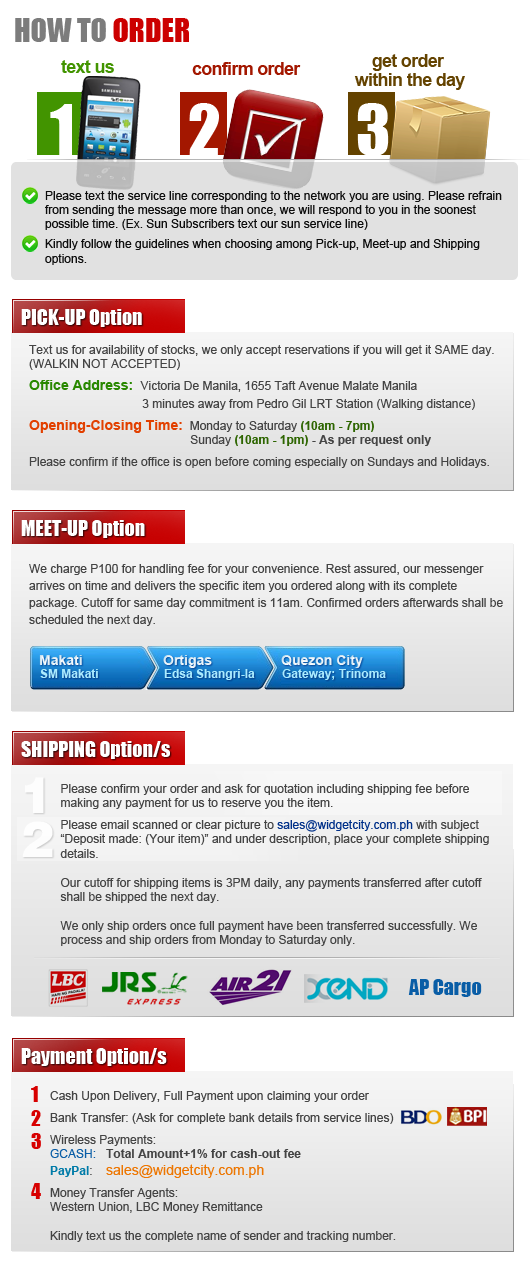
<style>
.page{position:relative;width:530px;height:1268px;background:#ffffff}
.page>*{position:absolute;margin:0}
.t1{font:30px "Impact";color:#7c7c7c}
.t2{font:30px "Impact";color:#cc0000}
.t3{font:18px/19px "Arial-BoldMT";letter-spacing:-0.04em;color:#644300}
.t4{font:18px "Arial-BoldMT";letter-spacing:-0.04em;color:#429400}
.t5{font:18px "Arial-BoldMT";letter-spacing:-0.04em;color:#a31700}
.t6{font:65px "Impact";letter-spacing:-0.04em;color:#ffffff}
.t7{font:12px "ArialMT";color:#0d0d0d}
.t8{font:12px/20px "ArialMT";color:#0d0d0d}
.t9{font:20px "Impact";color:#ffffff}
.t10{font:12px "ArialMT";color:#444444}
.t11{font:14px/22px "Arial-BoldMT";color:#298800}
.t12{font:12px/22px "ArialMT";color:#444444}
.t13{font:12px/18px "ArialMT";color:#444444}
.t14{font:14px/22px "Arial-BoldMT";color:#e24000}
.t15{font:12px/22px "Arial-BoldMT";color:#2d6500}
.t16{font:12px "Arial-BoldMT";color:#2d6500}
.t17{font:12px "Arial-BoldMT";color:#444444}
.t18{font:12px/17px "ArialMT";color:#444444}
.t19{font:14px "Arial-BoldMT";color:#e3f0f7}
.t20{font:14px "Arial-BoldMT";color:#e3eff7}
.t21{font:14px "Arial-BoldMT";color:#e5f1f7}
.t22{font:12px "Arial-BoldMT";color:#aaebff}
.t23{font:50px "Helvetica-Black";color:#ffffff}
.t24{font:12px/22px "ArialMT";color:#003089}
.t25{font:20px "Impact";color:#095da6}
.t26{font:20px "Impact";color:#d70000}
.t27{font:12px "ArialMT";color:#095da6}
.t28{font:12px "Arial-BoldMT";color:#007ba8}
.t29{font:14px "ArialMT";color:#ed7601}
</style>
<div class="page">
<p class="t1" style="left:15px;top:18px;width:174px;height:24px">HOW TO <span class="t2">ORDER</span></p>
<p class="t3" style="left:354px;top:54px;width:111px;height:36px;text-align:center">get order <br>within the day</p>
<p class="t4" style="left:61px;top:60px;width:53px;height:13px">text us</p>
<p class="t5" style="left:192px;top:62px;width:109px;height:13px">confirm order</p>
<p class="t6" style="left:50px;top:104px;width:22px;height:51px">1</p>
<p class="t6" style="left:189px;top:103px;width:30px;height:52px">2</p>
<p class="t6" style="left:357px;top:103px;width:32px;height:53px">3</p>
<p class="t7" style="left:45px;top:191px;width:457px;height:74px">Please text the service line corresponding to the network you are using. Please refrain from sending the message more than once, we will respond to you in the soonest possible time. (Ex. Sun Subscribers text our sun service line)<br><span class="t8">Kindly follow the guidelines when choosing among Pick-up, Meet-up and Shipping </span>options.</p>
<p class="t9" style="left:21px;top:309px;width:121px;height:18px">PICK-UP Option</p>
<p class="t10" style="left:29px;top:345px;width:465px;height:123px">Text us for availability of stocks, we only accept reservations if you will get it SAME day. <br>(WALKIN NOT ACCEPTED)<br><span class="t11">Office Address: </span><span class="t12"> Victoria De Manila, 1655 Taft Avenue Malate Manila<br></span><span class="t13">                                  3 minutes away from Pedro Gil LRT Station (Walking distance)<br></span><span class="t14">Opening-Closing Time:  </span><span class="t12">Monday to Saturday</span><span class="t15"> (10am - 7pm)<br>                   </span>Sunday <span class="t16">(10am - 1pm) </span><span class="t17">- As per request only<br></span><span class="t12">Please confirm if the office is open before coming especially on Sundays and Holidays.</span></p>
<p class="t9" style="left:21px;top:520px;width:124px;height:18px">MEET-UP Option</p>
<p class="t18" style="left:29px;top:564px;width:474px;height:62px">We charge P100 for handling fee for your convenience. Rest assured, our messenger arrives on time and delivers the specific item you ordered along with its complete package. Cutoff for same day commitment is 11am. Confirmed orders afterwards shall be scheduled the next day.</p>
<p class="t19" style="left:39px;top:655px;width:43px;height:10px">Makati</p>
<p class="t20" style="left:163px;top:655px;width:49px;height:13px">Ortigas</p>
<p class="t21" style="left:281px;top:655px;width:82px;height:13px">Quezon City</p>
<p class="t22" style="left:40px;top:669px;width:58px;height:9px">SM Makati</p>
<p class="t22" style="left:164px;top:669px;width:91px;height:11px">Edsa Shangri-la</p>
<p class="t22" style="left:282px;top:669px;width:104px;height:11px">Gateway; Trinoma</p>
<p class="t9" style="left:21px;top:741px;width:149px;height:18px">SHIPPING Option/s</p>
<p class="t23" style="left:25px;top:777px;width:19px;height:36px;opacity:0.85">1</p>
<p class="t10" style="left:60px;top:784px;width:429px;height:162px">Please confirm your order and ask for quotation including shipping fee before making any payment for us to reserve you the item. <br><span class="t12">Please email scanned or clear picture to </span><span class="t24">sales@widgetcity.com.ph</span><span class="t12"> with subject </span>“Deposit made: (Your item)” and under description, place your complete shipping details. <br><br>Our cutoff for shipping items is 3PM daily, any payments transferred after cutoff shall be shipped the next day. <br><br>We only ship orders once full payment have been transferred successfully. We process and ship orders from Monday to Saturday only.</p>
<p class="t23" style="left:22px;top:821px;width:31px;height:36px;opacity:0.85">2</p>
<p class="t25" style="left:408px;top:979px;width:74px;height:18px">AP Cargo</p>
<p class="t9" style="left:21px;top:1048px;width:146px;height:18px">Payment Option/s</p>
<p class="t26" style="left:31px;top:1086px;width:7px;height:16px">1</p>
<p class="t10" style="left:50px;top:1091px;width:346px;height:151px">Cash Upon Delivery, Full Payment upon claiming your order<br><span class="t12">Bank Transfer: (Ask for complete bank details from service lines)  <br>Wireless Payments: <br></span><span class="t27">GCASH:   </span><span class="t17">Total Amount+1% for cash-out fee<br></span><span class="t28">PayPal</span>:    <span class="t29">sales@widgetcity.com.ph<br></span><span class="t12">Money Transfer Agents:<br></span>Western Union, LBC Money Remittance<br><br>Kindly text us the complete name of sender and tracking number.</p>
<p class="t26" style="left:31px;top:1110px;width:10px;height:16px">2</p>
<p class="t26" style="left:31px;top:1133px;width:10px;height:16px">3</p>
<p class="t26" style="left:31px;top:1183px;width:10px;height:16px">4</p>
</div>
